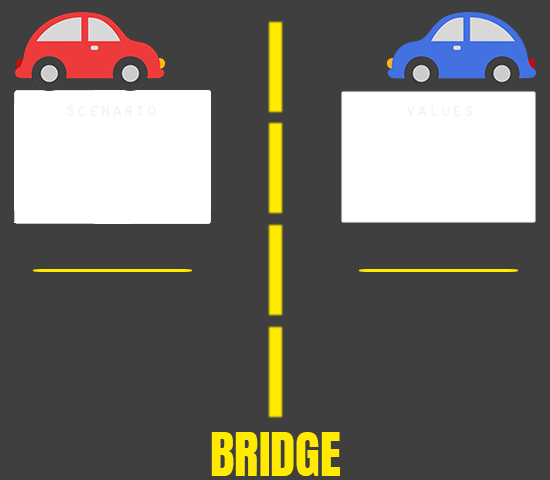
<style>
.page{position:relative;width:550px;height:480px;background:#403f3f}
.page>*{position:absolute;margin:0}
.t1{font:19.1px "OratorStd";color:#f3f3f3}
.t2{font:51px "Anton-Regular";color:#ffea00}
</style>
<div class="page">
<p class="t1" style="left:67px;top:106px;width:89px;height:10px">scenario</p>
<p class="t1" style="left:406px;top:106px;width:66px;height:10px">values</p>
<p class="t2" style="left:211px;top:432px;width:129px;height:44px">BRIDGE</p>
</div>
